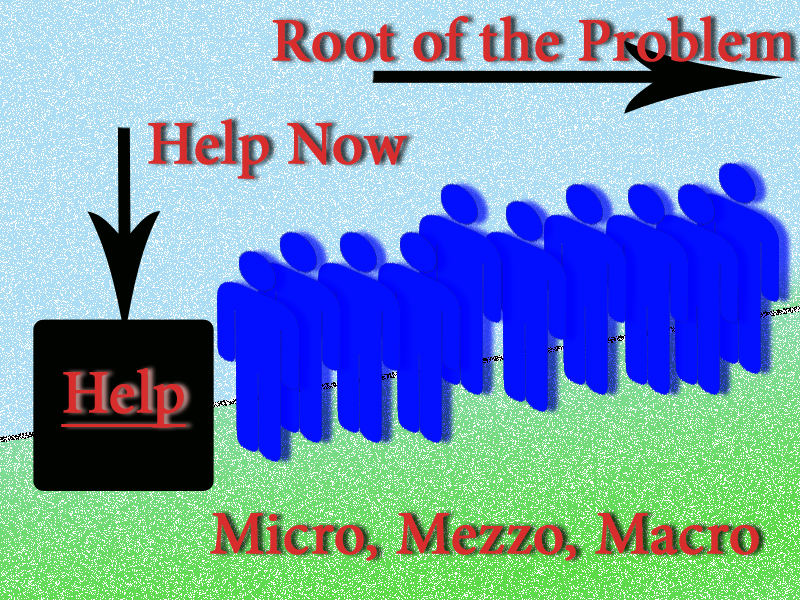
<style>
.page{position:relative;width:800px;height:600px}
.page>*{position:absolute;margin:0}
.t1{font:61px "MinionPro-Regular";color:#d82d2d;font-weight:bold}
.t2{font:61px "MinionPro-Regular";color:#d82d2d;font-weight:bold;text-decoration:underline}
.t3{font:35px "Orlando";color:#5bda46;font-weight:bold}
</style>
<div class="page">
<p class="t1" style="left:272px;top:16px;width:523px;height:46px">Root of the Problem</p>
<p class="t1" style="left:148px;top:119px;width:259px;height:60px">Help Now</p>
<p class="t2" style="left:61px;top:368px;width:125px;height:60px"><span class="t3"><br></span>Help</p>
<p class="t1" style="left:210px;top:513px;width:549px;height:48px">Micro, Mezzo, Macro</p>
</div>
